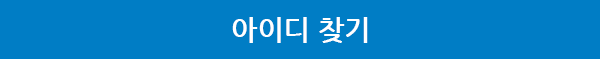
<style>
.page{position:relative;width:600px;height:59px;background:#007dc5}
.page>*{position:absolute;margin:0}
.t1{font:28px "NanumGothicBold";color:#ffffff}
</style>
<div class="page">
<p class="t1" style="left:232px;top:17px;width:136px;height:26px">아이디 찾기</p>
</div>
